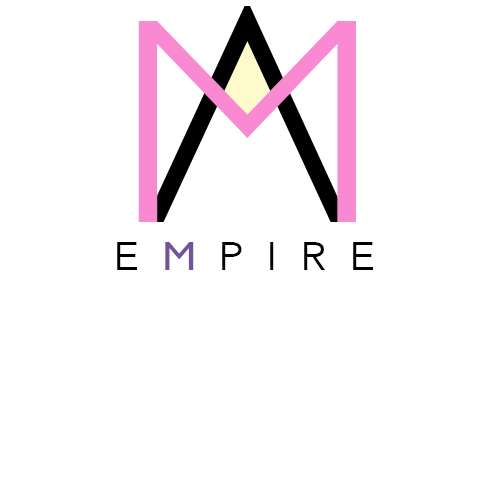
<style>
.page{position:relative;width:500px;height:500px;background:#ffffff}
.page>*{position:absolute;margin:0}
.t1{font:40px "AvenirNext-Regular";letter-spacing:0.5em;color:#000000;text-transform:uppercase;scale:1.11 1}
.t2{font:40px "GillSans";letter-spacing:0.5em;color:#71539e;text-transform:uppercase;scale:1.11 1}
</style>
<div class="page">
<p class="t1" style="left:117px;top:242px;width:256px;height:28px">e<span class="t2">m</span>pire</p>
</div>
